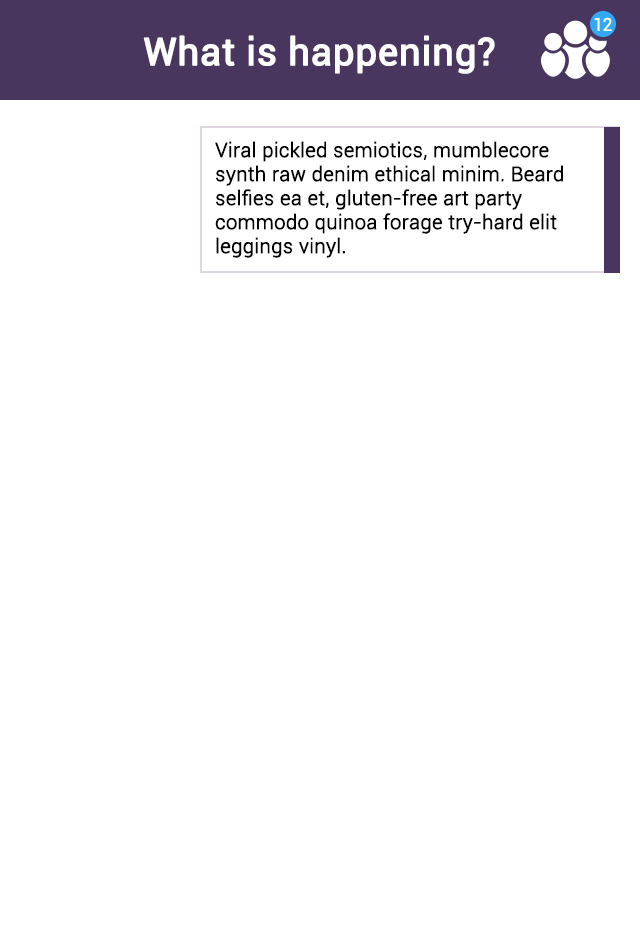
<style>
.page{position:relative;width:640px;height:940px;background:#ffffff}
.page>*{position:absolute;margin:0}
.t1{font:18px "Roboto-Regular";letter-spacing:-0.05em;color:#ffffff}
.t2{font:38px "Roboto-Regular";color:#ffffff;font-weight:bold}
.t3{font:20px "Roboto-Light";color:#000000;font-weight:bold}
</style>
<div class="page">
<p class="t1" style="left:594px;top:17px;width:18px;height:14px">12</p>
<p class="t2" style="left:143px;top:35px;width:352px;height:39px">What is happening?</p>
<p class="t3" style="left:215px;top:141px;width:348px;height:117px">Viral pickled semiotics, mumblecore <br>synth raw denim ethical minim. Beard <br>selfies ea et, gluten-free art party <br>commodo quinoa forage try-hard elit <br>leggings vinyl.</p>
</div>
